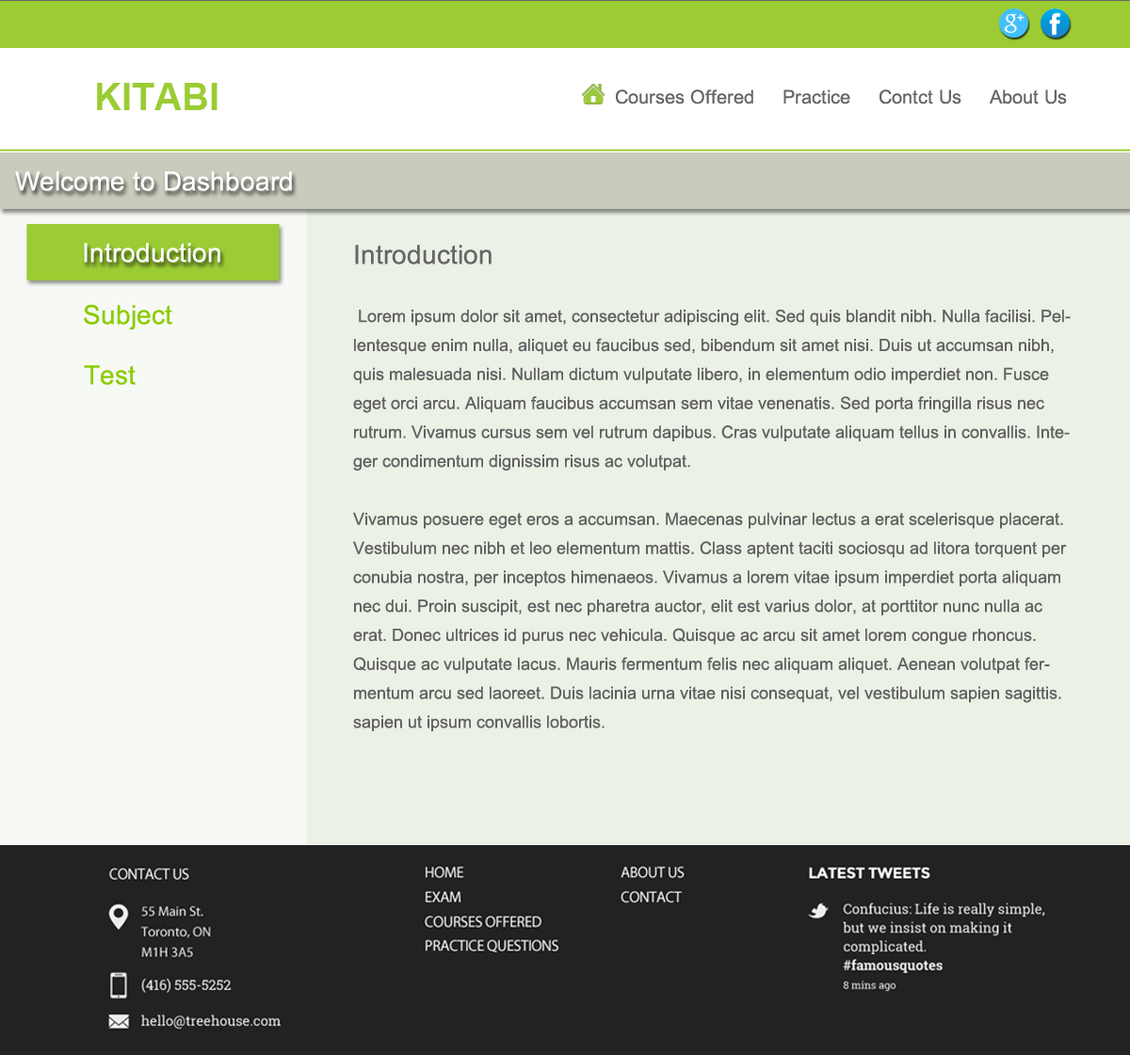
<style>
.page{position:relative;width:1130px;height:1055px;background:#ebf1e5}
.page>*{position:absolute;margin:0}
.t1{font:37.7px "Arial-BoldMT";color:#9bcc34}
.t2{font:18.8px "ArialMT";color:#666666}
.t3{font:26.4px "ArialMT";color:#ffffff}
.t4{font:26.4px "ArialMT";color:#666666}
.t5{font:26.4px "ArialMT";color:#8acc00}
.t6{font:16.9px/29px "ArialMT";color:#616161}
</style>
<div class="page">
<p class="t1" style="left:97px;top:83px;width:120px;height:27px">KITABI</p>
<p class="t2" style="left:616px;top:89px;width:451px;height:16px">Courses Offered     Practice     Contct Us     About Us</p>
<p class="t3" style="left:15px;top:171px;width:277px;height:20px">Welcome to Dashboard</p>
<p class="t3" style="left:84px;top:243px;width:136px;height:20px">Introduction</p>
<p class="t4" style="left:355px;top:245px;width:136px;height:20px">Introduction</p>
<p class="t5" style="left:84px;top:304px;width:88px;height:26px">Subject</p>
<p class="t6" style="left:353px;top:310px;width:717px;height:422px">Lorem ipsum dolor sit amet, consectetur adipiscing elit. Sed quis blandit nibh. Nulla facilisi. Pellentesque enim nulla, aliquet eu faucibus sed, bibendum sit amet nisi. Duis ut accumsan nibh, quis malesuada nisi. Nullam dictum vulputate libero, in elementum odio imperdiet non. Fusce eget orci arcu. Aliquam faucibus accumsan sem vitae venenatis. Sed porta fringilla risus nec rutrum. Vivamus cursus sem vel rutrum dapibus. Cras vulputate aliquam tellus in convallis. Integer condimentum dignissim risus ac volutpat.<br><br>Vivamus posuere eget eros a accumsan. Maecenas pulvinar lectus a erat scelerisque placerat. Vestibulum nec nibh et leo elementum mattis. Class aptent taciti sociosqu ad litora torquent per conubia nostra, per inceptos himenaeos. Vivamus a lorem vitae ipsum imperdiet porta aliquam nec dui. Proin suscipit, est nec pharetra auctor, elit est varius dolor, at porttitor nunc nulla ac erat. Donec ultrices id purus nec vehicula. Quisque ac arcu sit amet lorem congue rhoncus. Quisque ac vulputate lacus. Mauris fermentum felis nec aliquam aliquet. Aenean volutpat fermentum arcu sed laoreet. Duis lacinia urna vitae nisi consequat, vel vestibulum sapien sagittis. sapien ut ipsum convallis lobortis.</p>
<p class="t5" style="left:84px;top:365px;width:52px;height:20px">Test</p>
</div>
